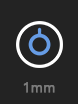
<style>
.page{position:relative;width:78px;height:104px;background:#232323}
.page>*{position:absolute;margin:0}
.t1{font:14px "SegoeUI";color:#7c7c7c;font-weight:bold}
</style>
<div class="page">
<p class="t1" style="left:23px;top:82px;width:32px;height:11px">1mm</p>
</div>
